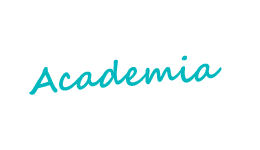
<style>
.page{position:relative;width:260px;height:150px;background:#ffffff}
.page>*{position:absolute;margin:0}
.t1{font:35px "SegoeScript-Bold";color:#01b8be}
</style>
<div class="page">
<p class="t1" style="left:29px;top:55px;width:193px;height:40px;rotate:-4deg">Academia</p>
</div>
